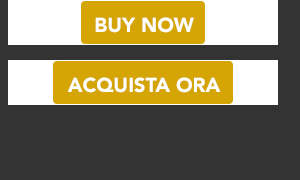
<style>
.page{position:relative;width:300px;height:180px;background:#333333}
.page>*{position:absolute;margin:0}
.t1{font:20px "Avenir-Black";color:#ffffff;text-transform:uppercase}
</style>
<div class="page">
<p class="t1" style="left:95px;top:17px;width:99px;height:16px">buy now</p>
<p class="t1" style="left:67px;top:77px;width:154px;height:16px">Acquista ora</p>
</div>
